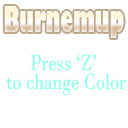
<style>
.page{position:relative;width:128px;height:128px;background:#ffffff}
.page>*{position:absolute;margin:0}
.t1{font:34.8px "GillSans-UltraBold";scale:0.52 1}
.t2{font:21.6px/18.3px "JavaneseText";color:#8cffeb;scale:0.82 1}
</style>
<div class="page">
<p class="t1" style="left:4px;top:6px;width:120px;height:32px">Burnemup</p>
<p class="t2" style="left:6px;top:54px;width:120px;height:42px;text-align:center">Press ‘Z’<br> to change Color</p>
</div>
